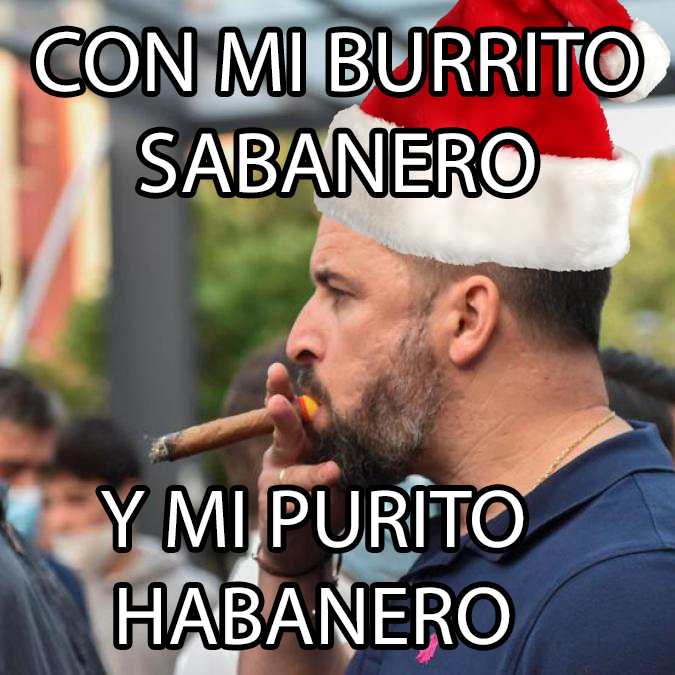
<style>
.page{position:relative;width:675px;height:675px}
.page>*{position:absolute;margin:0}
.t1{font:86.4px "MyriadPro-Regular";color:#ffffff}
.t2{font:83.2px "MyriadPro-Regular";color:#ffffff}
</style>
<div class="page">
<p class="t1" style="left:36px;top:31px;width:603px;height:162px;text-align:center">CON MI BURRITO<br>SABANERO</p>
<p class="t2" style="left:101px;top:490px;width:423px;height:155px;text-align:center">Y MI PURITO<br>HABANERO</p>
</div>
